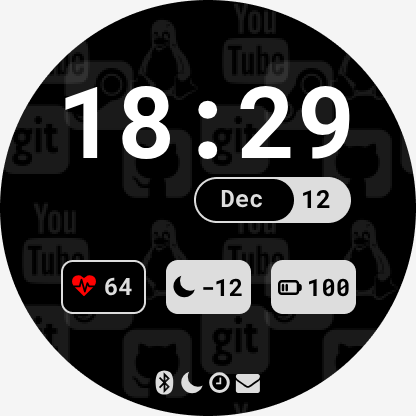
<style>
.page{position:relative;width:416px;height:416px;background:#000000}
.page>*{position:absolute;margin:0}
.t1{font:100px "RobotoMono-Bold";color:#f3f3f3}
.t2{font:24px "RobotoMono-Bold";color:#dddddd}
.t3{font:25px "RobotoMono-Bold";color:#000000}
.t4{font:24px "RobotoMono-Bold";color:#000000}
</style>
<div class="page">
<p class="t1" style="left:65px;top:85px;width:285px;height:74px">18:29</p>
<p class="t2" style="left:221px;top:189px;width:41px;height:19px">Dec</p>
<p class="t3" style="left:303px;top:189px;width:27px;height:19px">12</p>
<p class="t2" style="left:105px;top:277px;width:27px;height:19px">64</p>
<p class="t4" style="left:203px;top:278px;width:39px;height:18px">-12</p>
<p class="t4" style="left:309px;top:278px;width:40px;height:19px">100</p>
</div>
